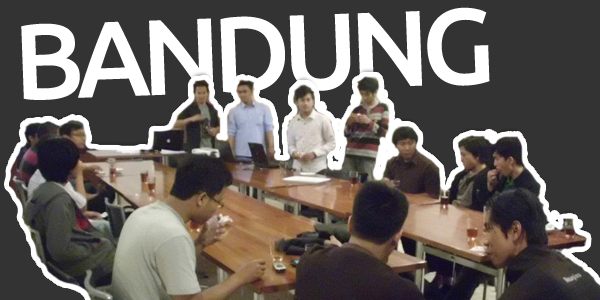
<style>
.page{position:relative;width:600px;height:300px;background:#333333}
.page>*{position:absolute;margin:0}
.t1{font:107.4px "Ubuntu-Medium";letter-spacing:-0.075em;color:#ffffff;text-transform:uppercase}
</style>
<div class="page">
<p class="t1" style="left:21px;top:7px;width:469px;height:93px;rotate:-2deg">BANDUNG</p>
</div>
